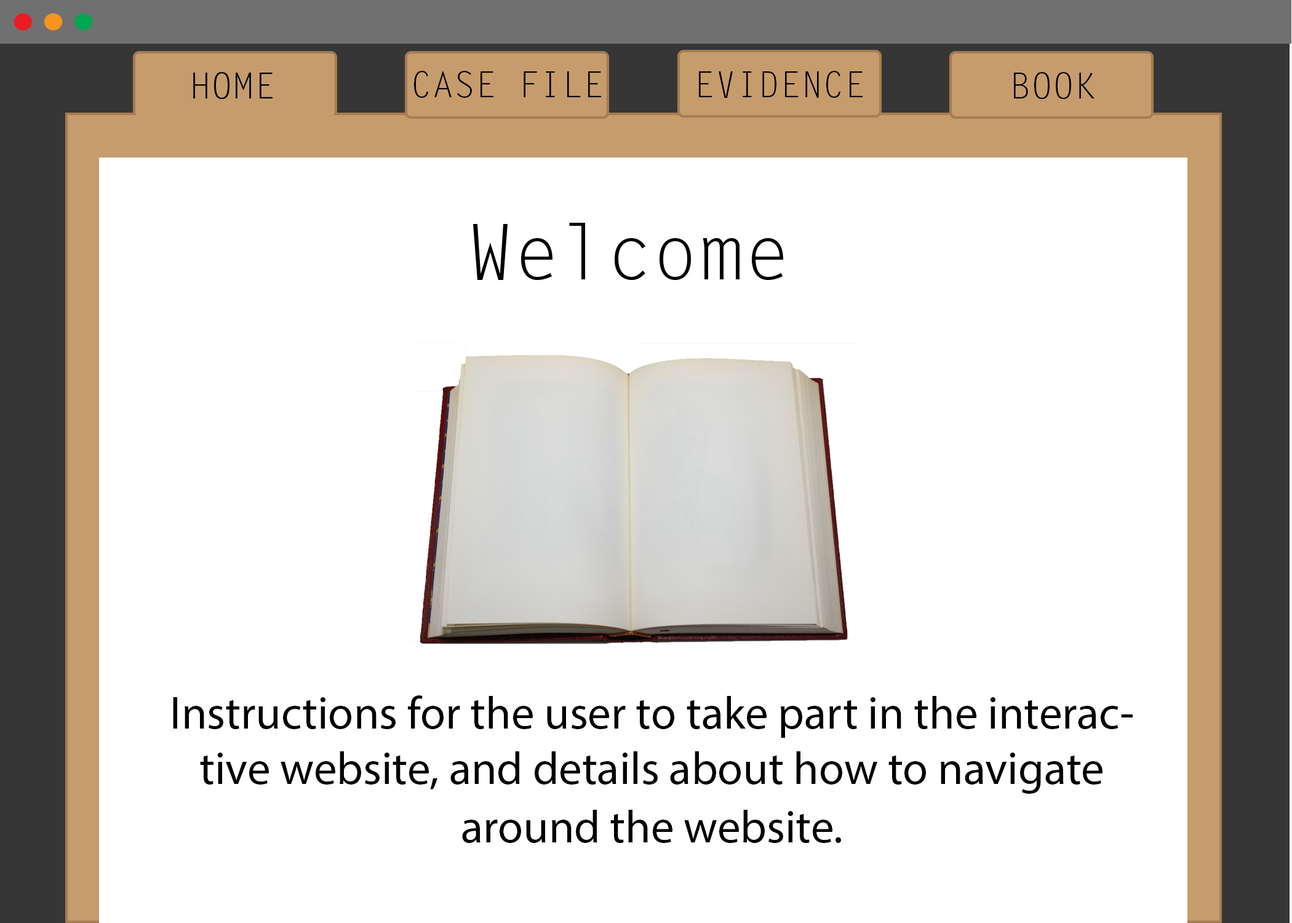
<style>
.page{position:relative;width:1292px;height:923px;background:#ffffff}
.page>*{position:absolute;margin:0}
.t1{font:35.9px "LetterGothicStd";color:#000000}
.t2{font:76.9px "LetterGothicStd";color:#000000}
.t3{font:46.1px "MyriadPro-Regular";color:#000000}
</style>
<div class="page">
<p class="t1" style="left:193px;top:72px;width:80px;height:27px">HOME</p>
<p class="t1" style="left:414px;top:70px;width:187px;height:28px">CASE FILE</p>
<p class="t1" style="left:699px;top:71px;width:164px;height:27px">EVIDENCE</p>
<p class="t1" style="left:1014px;top:72px;width:81px;height:27px">BOOK</p>
<p class="t2" style="left:473px;top:223px;width:310px;height:57px">Welcome</p>
<p class="t3" style="left:173px;top:695px;width:960px;height:148px;text-align:center">Instructions for the user to take part in the interactive website, and details about how to navigate around the website.</p>
</div>
